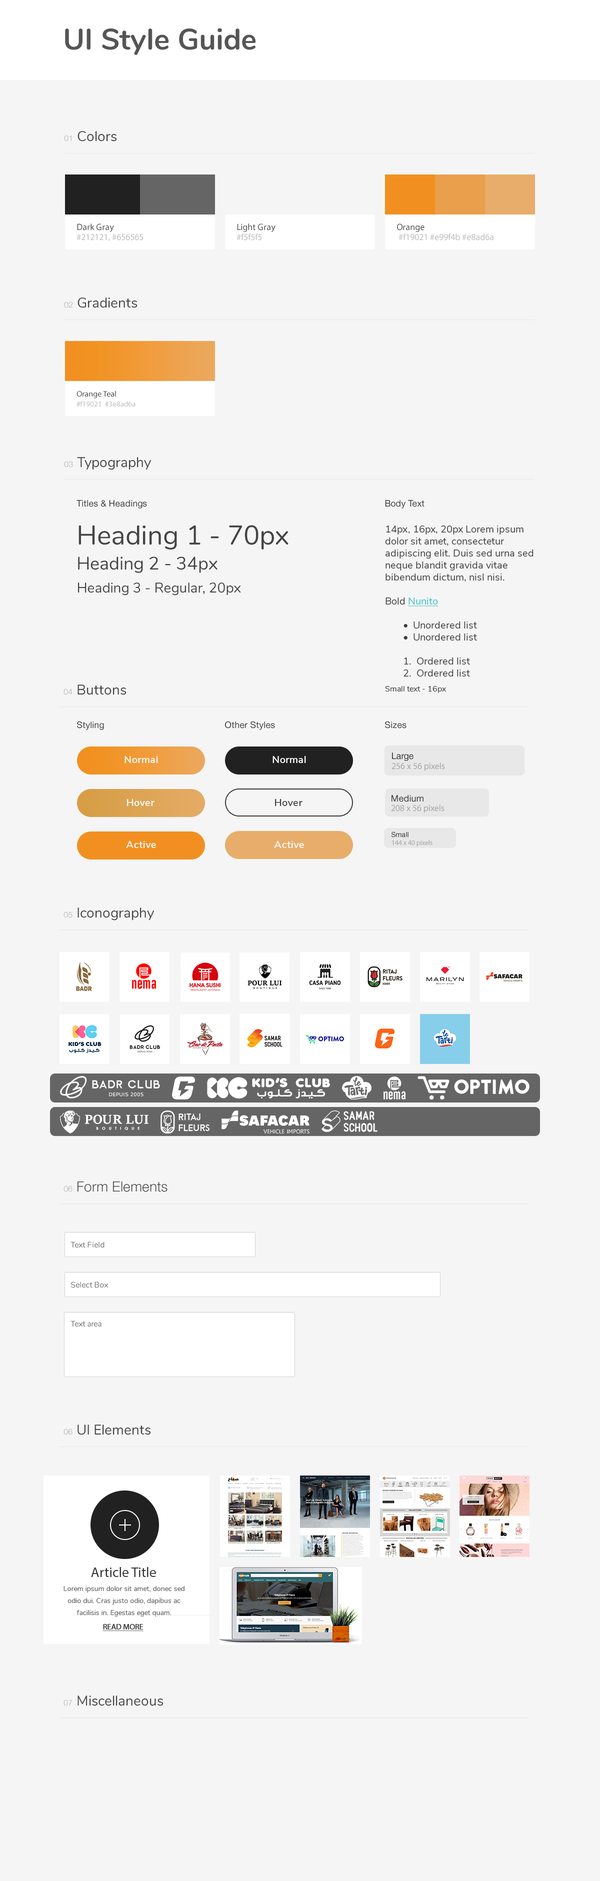
<style>
.page{position:relative;width:600px;height:1881px;background:#f5f5f5}
.page>*{position:absolute;margin:0}
.t1{font:29.5px "Nunito-Bold";color:#555555}
.t2{font:14px "Nunito-Regular";color:#444444}
.t3{font:8px "HelveticaNeue-Light";color:#aaaaaa}
.t4{font:9px/10px "MyriadPro-Regular";color:#bbbbbb}
.t5{font:9px "MyriadPro-Regular";color:#444444}
.t6{font:7.5px/10px "MyriadPro-Regular";color:#bbbbbb}
.t7{font:8px "MyriadPro-Regular";color:#444444}
.t8{font:9px "HelveticaNeue";color:#444444}
.t9{font:14px/23px "Nunito-Regular";color:#444444}
.t10{font:27px/25px "Nunito-Regular";color:#444444}
.t11{font:18px/25px "Nunito-Regular";color:#444444}
.t12{font:12px/20px "MyriadPro-Regular";color:#444444}
.t13{font:10px/17px "MyriadPro-Regular";color:#444444}
.t14{font:10px/15px "MyriadPro-Regular";color:#444444}
.t15{font:10px/12px "NunitoSans-Regular";color:#3d3d3f}
.t16{font:10px/12px "NunitoSans-Regular";color:#35c2cd;text-decoration:underline}
.t17{font:8px/15px "NunitoSans-Regular";color:#444444}
.t18{font:10px "NunitoSans-SemiBold";letter-spacing:0.025em;color:#ffffff}
.t19{font:9px "HelveticaNeue";color:#3b3b3b}
.t20{font:9px "MyriadPro-Regular";color:#a4a4a4}
.t21{font:10px "NunitoSans-SemiBold";letter-spacing:0.025em;color:#3d3d3f}
.t22{font:7px "HelveticaNeue";color:#3b3b3b}
.t23{font:7px "MyriadPro-Regular";color:#a4a4a4}
.t24{font:14px "HelveticaNeue-Light";color:#444444}
.t25{font:8px "Nunito-Regular";color:#666666}
.t26{font:14px "MyriadPro-Regular";color:#393a3c}
.t27{font:7px/12px "NunitoSans-Regular";color:#666666}
.t28{font:8px "MyriadPro-Regular";color:#393a3c;text-decoration:underline}
</style>
<div class="page">
<p class="t1" style="left:65px;top:28px;width:191px;height:27px">UI Style Guide</p>
<p class="t2" style="left:64px;top:131px;width:52px;height:11px"><span class="t3">01 </span>Colors</p>
<p class="t4" style="left:76px;top:224px;width:68px;height:18px"><span class="t5">Dark Gray<br></span>#212121, #656565</p>
<p class="t5" style="left:236px;top:224px;width:40px;height:16px">Light Gray<br><span class="t4">#f5f5f5</span></p>
<p class="t4" style="left:397px;top:224px;width:97px;height:16px"><span class="t5">Orange<br></span> #f19021 #e99f4b #e8ad6a</p>
<p class="t2" style="left:64px;top:298px;width:73px;height:10px"><span class="t3">02 </span>Gradients</p>
<p class="t6" style="left:76px;top:390px;width:60px;height:16px"><span class="t7">Orange Teal<br></span>#f19021  #3e8ad6a</p>
<p class="t2" style="left:64px;top:457px;width:87px;height:13px"><span class="t3">03 </span>Typography</p>
<p class="t8" style="left:76px;top:500px;width:71px;height:8px">Titles &amp; Headings</p>
<p class="t8" style="left:385px;top:500px;width:39px;height:8px">Body Text</p>
<p class="t9" style="left:78px;top:525px;width:210px;height:71px"><span class="t10">Heading 1 - 70px<br></span><span class="t11">Heading 2 - 34px<br></span>Heading 3 - Regular, 20px<br><span class="t12">Heading 4 - Medium, 20px<br></span><span class="t13">Heading 5 - Bold, 20px<br></span><span class="t14">Heading 6 - Bold, 20px</span></p>
<p class="t15" style="left:385px;top:526px;width:149px;height:167px">14px, 16px, 20px Lorem ipsum dolor sit amet, consectetur adipiscing elit. Duis sed urna sed neque blandit gravida vitae bibendum dictum, nisl nisi.<br><br>Bold <span class="t16">Nunito <br><br></span> •  Unordered list<br> •  Unordered list<br><br> 1.  Ordered list<br> 2.  Ordered list<br><span class="t17">Small text - 16px</span></p>
<p class="t2" style="left:64px;top:684px;width:62px;height:11px"><span class="t3">04 </span>Buttons</p>
<p class="t8" style="left:77px;top:721px;width:27px;height:9px">Styling</p>
<p class="t8" style="left:225px;top:721px;width:50px;height:9px">Other Styles</p>
<p class="t8" style="left:385px;top:721px;width:21px;height:7px">Sizes</p>
<p class="t18" style="left:124px;top:756px;width:34px;height:7px">Normal</p>
<p class="t18" style="left:272px;top:756px;width:34px;height:7px">Normal</p>
<p class="t19" style="left:392px;top:752px;width:22px;height:9px">Large</p>
<p class="t20" style="left:392px;top:762px;width:53px;height:9px">256 x 56 pixels</p>
<p class="t19" style="left:392px;top:795px;width:32px;height:7px">Medium</p>
<p class="t18" style="left:127px;top:799px;width:27px;height:7px">Hover</p>
<p class="t21" style="left:275px;top:799px;width:27px;height:7px">Hover</p>
<p class="t20" style="left:391px;top:804px;width:53px;height:9px">208 x 56 pixels</p>
<p class="t22" style="left:392px;top:832px;width:16px;height:6px">Small</p>
<p class="t18" style="left:126px;top:841px;width:30px;height:7px">Active</p>
<p class="t18" style="left:274px;top:841px;width:30px;height:7px">Active</p>
<p class="t23" style="left:392px;top:840px;width:40px;height:6px">144 x 40 pixels</p>
<p class="t2" style="left:64px;top:908px;width:90px;height:12px"><span class="t3">05 </span>Iconography</p>
<p class="t24" style="left:64px;top:1182px;width:104px;height:10px"><span class="t3">06</span> Form Elements</p>
<p class="t25" style="left:70px;top:1242px;width:34px;height:6px">Text Field</p>
<p class="t25" style="left:71px;top:1282px;width:37px;height:6px">Select Box</p>
<p class="t25" style="left:70px;top:1320px;width:32px;height:7px">Text area</p>
<p class="t2" style="left:64px;top:1424px;width:86px;height:11px"><span class="t3">06 </span>UI Elements</p>
<p class="t26" style="left:91px;top:1567px;width:65px;height:10px">Article Title</p>
<p class="t27" style="left:64px;top:1586px;width:120px;height:30px;text-align:center">Lorem ipsum dolor sit amet, donec sed odio dui. Cras justo odio, dapibus ac facilisis in. Egestas eget quam.</p>
<p class="t28" style="left:102px;top:1624px;width:42px;height:7px">READ MORE</p>
<p class="t2" style="left:64px;top:1696px;width:99px;height:10px"><span class="t3">07 </span>Miscellaneous</p>
</div>
